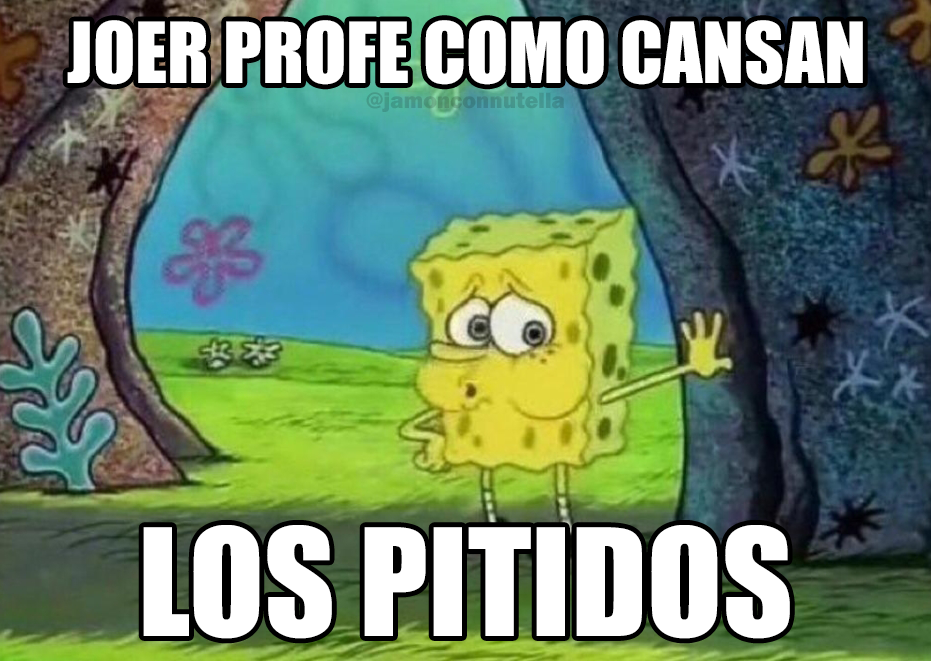
<style>
.page{position:relative;width:931px;height:661px}
.page>*{position:absolute;margin:0}
.t1{font:77.6px "Impact";color:#ffffff}
.t2{font:22.9px "FranklinGothic-Heavy";color:#45968a}
.t3{font:137.5px "Impact";color:#ffffff}
</style>
<div class="page">
<p class="t1" style="left:67px;top:20px;width:796px;height:65px">JOER PROFE COMO CANSAN</p>
<p class="t2" style="left:366px;top:92px;width:198px;height:20px">@jamonconnutella</p>
<p class="t3" style="left:143px;top:525px;width:647px;height:114px">LOS PITIDOS</p>
</div>
